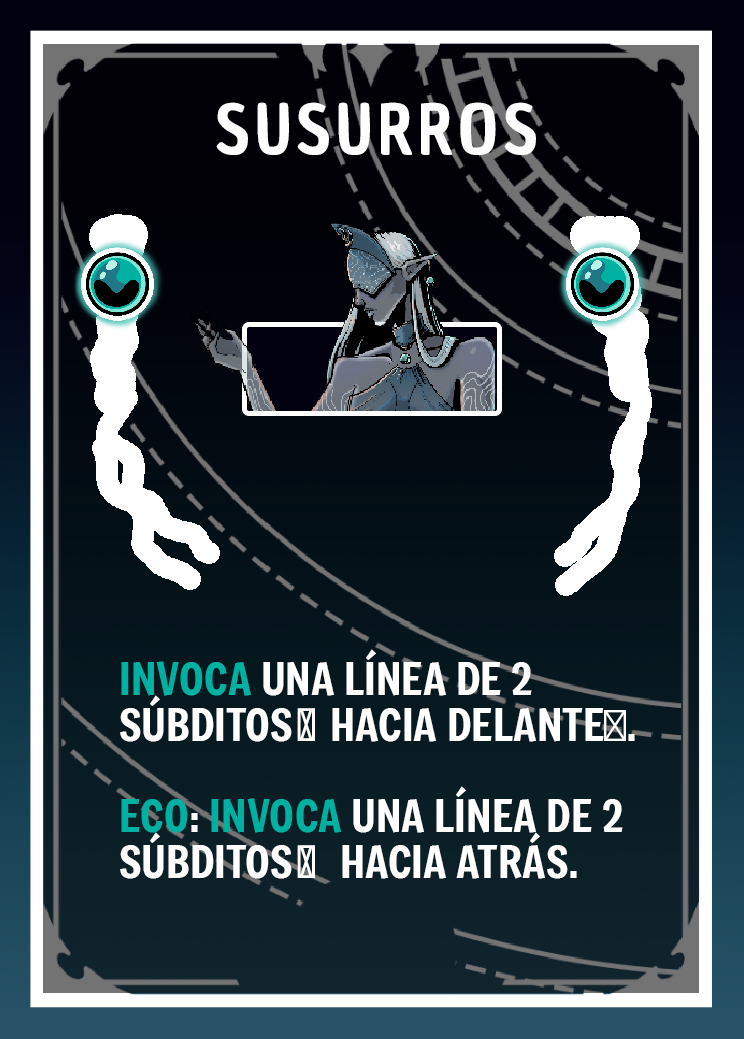
<style>
.page{position:relative;width:744px;height:1039px}
.page>*{position:absolute;margin:0}
.t1{font:66.7px "ChauPhilomeneOne-Regular";letter-spacing:0.075em;color:#ffffff}
.t2{font:43.7px/45.8px "Freeman-Regular";color:#ffffff}
.t3{font:43.7px/45.8px "Freeman-Regular";color:#00b1a2}
.t4{font:43.7px/45.8px "MyriadPro-Regular";color:#ffffff}
</style>
<div class="page">
<p class="t1" style="left:216px;top:102px;width:320px;height:53px">SUSURROS</p>
<p class="t2" style="left:120px;top:649px;width:515px;height:230px"><span class="t3">INVOCA </span>UNA LÍNEA DE 2 SÚBDITOS👾 HACIA DELANTE<span class="t4">⬆️</span>. <br><span class="t3"><br>ECO</span>: <span class="t3">INVOCA </span>UNA LÍNEA DE 2 SÚBDITOS👾  HACIA ATRÁS.</p>
</div>
